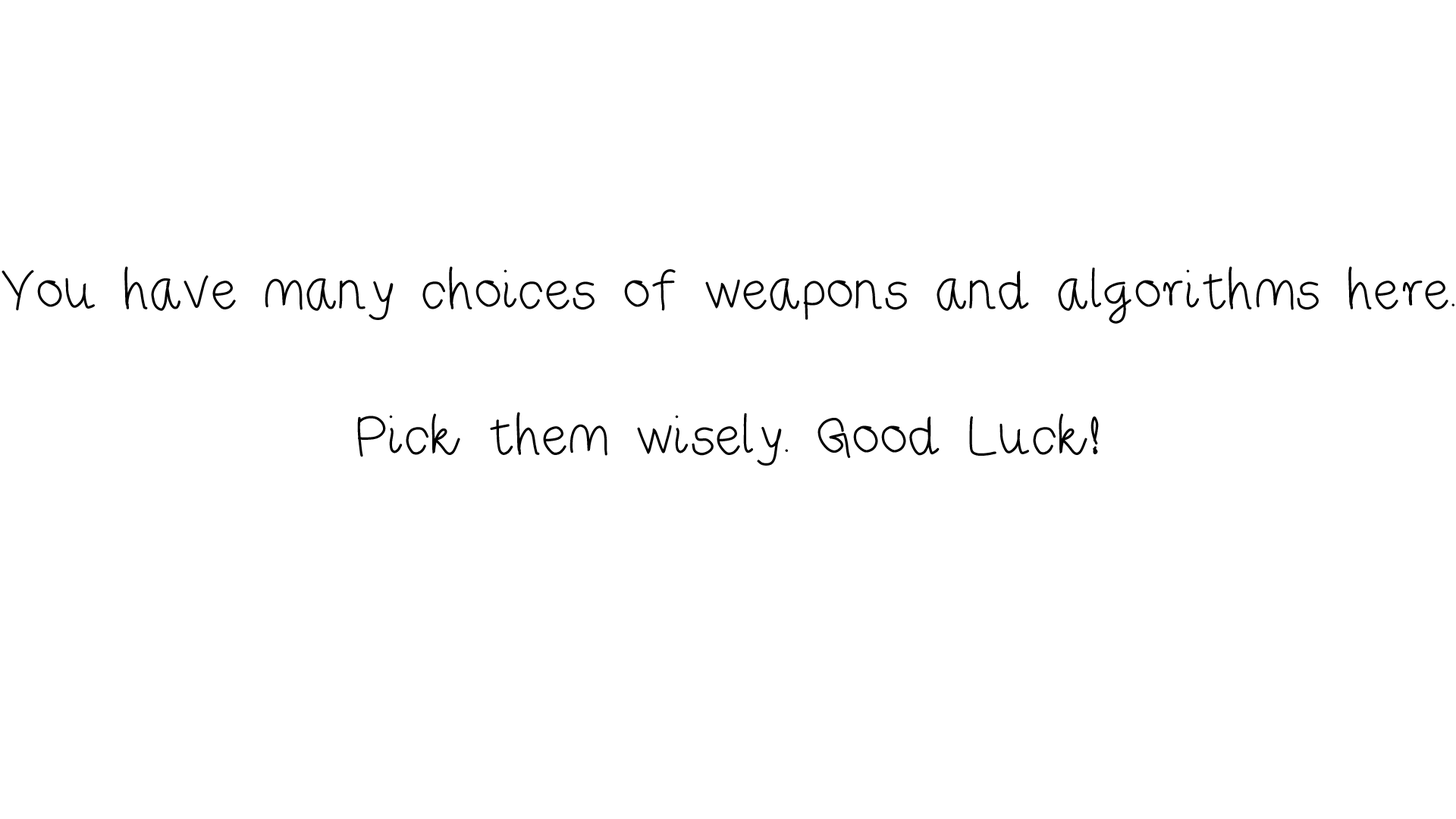
<style>
.page{position:relative;width:1456px;height:819px;background:#ffffff}
.page>*{position:absolute;margin:0}
.t1{font:60.7px "RiseStarHand";color:#000000}
</style>
<div class="page">
<p class="t1" style="left:2px;top:266px;width:1452px;height:200px;text-align:center">You have many choices of weapons and algorithms here.<br><br>Pick them wisely. Good Luck!</p>
</div>
